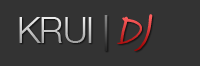
<style>
.page{position:relative;width:200px;height:66px;background:#333333}
.page>*{position:absolute;margin:0}
.t1{font:36px "HelveticaNeue-Light";letter-spacing:-0.025em}
.t2{font:36px "HelveticaNeue";letter-spacing:-0.025em}
.t3{font:48px "Journal";letter-spacing:-0.025em}
</style>
<div class="page">
<p class="t1" style="left:19px;top:15px;width:89px;height:36px">KRUI <span class="t2">|</span></p>
<p class="t3" style="left:117px;top:14px;width:36px;height:37px">DJ</p>
</div>
